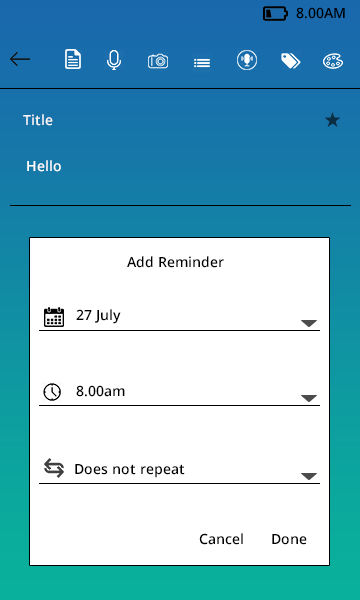
<style>
.page{position:relative;width:360px;height:600px;background:#ffffff}
.page>*{position:absolute;margin:0}
.t1{font:14px "OpenSans-Semibold";color:#000000}
.t2{font:14px "OpenSans-Semibold";color:#fbf8f8}
.t3{font:14px "OpenSans-Semibold";color:#ffffff}
</style>
<div class="page">
<p class="t1" style="left:296px;top:7px;width:49px;height:12px">8.00AM</p>
<p class="t2" style="left:23px;top:114px;width:30px;height:12px">Title</p>
<p class="t3" style="left:27px;top:160px;width:34px;height:12px">Hello</p>
<p class="t1" style="left:127px;top:256px;width:97px;height:12px">Add Reminder</p>
<p class="t1" style="left:76px;top:309px;width:45px;height:15px">27 July</p>
<p class="t1" style="left:76px;top:385px;width:49px;height:12px">8.00am</p>
<p class="t1" style="left:75px;top:464px;width:110px;height:14px">Does not repeat</p>
<p class="t1" style="left:199px;top:533px;width:44px;height:12px">Cancel</p>
<p class="t1" style="left:272px;top:534px;width:35px;height:11px">Done</p>
</div>
